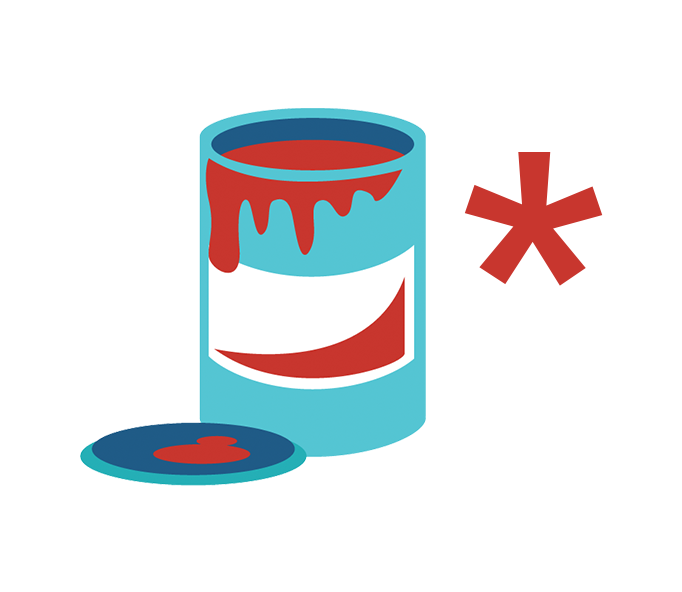
<style>
.page{position:relative;width:682px;height:592px;background:#ffffff}
.page>*{position:absolute;margin:0}
.t1{font:304.6px "Roboto-Black";letter-spacing:-0.025em;color:#c8362e}
</style>
<div class="page">
<p class="t1" style="left:464px;top:152px;width:139px;height:134px">*</p>
</div>
